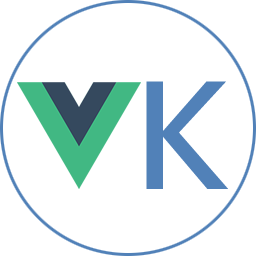
<style>
.page{position:relative;width:256px;height:256px;background:#ffffff}
.page>*{position:absolute;margin:0}
.t1{font:168.3px "Consolas";color:#5181b8;scale:1.11 1}
</style>
<div class="page">
<p class="t1" style="left:146px;top:81px;width:82px;height:108px">K</p>
</div>
